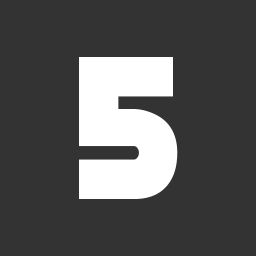
<style>
.page{position:relative;width:256px;height:256px;background:#333333}
.page>*{position:absolute;margin:0}
.t1{font:200px "DeathStar";color:#ffffff}
</style>
<div class="page">
<p class="t1" style="left:79px;top:57px;width:99px;height:142px">5</p>
</div>
